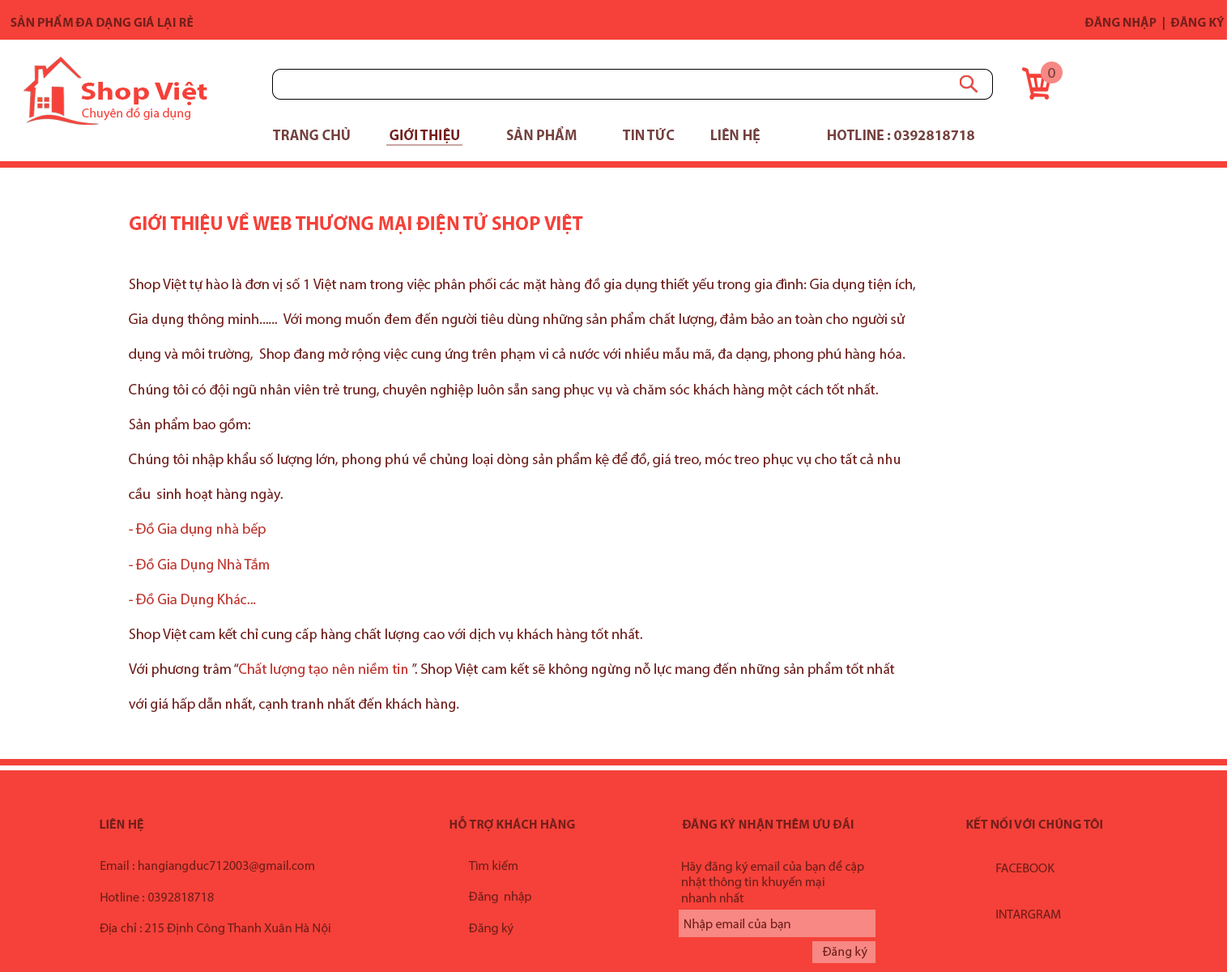
<style>
.page{position:relative;width:1227px;height:972px;background:#ffffff}
.page>*{position:absolute;margin:0}
.t1{font:13px "MyriadPro-Bold";color:#751f1b}
.t2{font:14.6px "MyriadPro-Regular";color:#75413e}
.t3{font:25.2px "MyriadPro-Bold";color:#f54139;scale:1.19 1}
.t4{font:13px "MyriadPro-Regular";color:#f54139}
.t5{font:13px "MyriadPro-Regular";color:#ffffff}
.t6{font:14.6px "MyriadPro-Bold";color:#75413e}
.t7{font:14.6px "MyriadPro-Bold";color:#751f1b}
.t8{font:14.6px "MyriadPro-Regular";color:#751f1b}
.t9{font:19.4px "MyriadPro-Bold";color:#f54139;text-transform:uppercase}
.t10{font:14.6px "MyriadPro-Regular";color:#c2342d}
.t11{font:13px "MyriadPro-Bold";color:#751f1b;text-transform:uppercase}
.t12{font:13px "MyriadPro-Regular";color:#751f1b}
</style>
<div class="page">
<p class="t1" style="left:11px;top:15px;width:182px;height:15px">SẢN PHẨM ĐA DẠNG GIÁ LẠI RẺ</p>
<p class="t1" style="left:1084px;top:16px;width:141px;height:14px">ĐĂNG NHẬP  |  ĐĂNG KÝ</p>
<p class="t2" style="left:1048px;top:68px;width:7px;height:10px">0</p>
<p class="t3" style="left:81px;top:82px;width:126px;height:23px">Shop Việt</p>
<p class="t4" style="left:77px;top:107px;width:113px;height:14px"><span class="t5">s</span>Chuyên đồ gia dụng</p>
<p class="t6" style="left:273px;top:126px;width:701px;height:17px">TRANG CHỦ   <span class="t7">GIỚI THIỆU</span>  SẢN PHẨM   TIN TỨC  LIÊN HỆ   HOTLINE : 0392818718</p>
<p class="t8" style="left:129px;top:212px;width:786px;height:500px"><span class="t9">Giới thiệu về web thương mại điện tử Shop Việt<br><br><br></span>Shop Việt tự hào là đơn vị số 1 Việt nam trong việc phân phối các mặt hàng đồ gia dụng thiết yếu trong gia đình: Gia dụng tiện ích,<br><br>Gia dụng thông minh......  Với mong muốn đem đến người tiêu dùng những sản phẩm chất lượng, đảm bảo an toàn cho người sử <br><br>dụng và môi trường,  Shop đang mở rộng việc cung ứng trên phạm vi cả nước với nhiều mẫu mã, đa dạng, phong phú hàng hóa. <br><br>Chúng tôi có đội ngũ nhân viên trẻ trung, chuyên nghiệp luôn sẵn sang phục vụ và chăm sóc khách hàng một cách tốt nhất.<br><br>Sản phẩm bao gồm:<br><br>Chúng tôi nhập khẩu số lượng lớn, phong phú về chủng loại dòng sản phẩm kệ để đồ, giá treo, móc treo phục vụ cho tất cả nhu <br><br>cầu  sinh hoạt hàng ngày.<br> <br><span class="t10">- Đồ Gia dụng nhà bếp<br><br>- Đồ Gia Dụng Nhà Tắm<br><br>- Đồ Gia Dụng Khác...<br><br></span>Shop Việt cam kết chỉ cung cấp hàng chất lượng cao với dịch vụ khách hàng tốt nhất.<br><br>Với phương trâm “<span class="t10">Chất lượng tạo nên niềm tin </span>”. Shop Việt cam kết sẽ không ngừng nỗ lực mang đến những sản phẩm tốt nhất <br><br>với giá hấp dẫn nhất, cạnh tranh nhất đến khách hàng.</p>
<p class="t11" style="left:100px;top:816px;width:1002px;height:16px"><span class="t1">LIÊN HỆ             HỖ TRỢ KHÁCH HÀNG     </span>Đăng ký nhận thêm ưu đãi             Kết nối với chúng tôi</p>
<p class="t12" style="left:100px;top:860px;width:230px;height:75px">Email : hangiangduc712003@gmail.com<br><br>Hotline : 0392818718<br><br>Địa chỉ : 215 Định Công Thanh Xuân Hà Nội</p>
<p class="t12" style="left:468px;top:859px;width:63px;height:76px">Tìm kiếm<br><br>Đăng  nhập<br><br>Đăng ký</p>
<p class="t12" style="left:682px;top:860px;width:182px;height:42px">Hãy đăng ký email của bạn để cập <br>nhật thông tin khuyến mại<br>nhanh nhất</p>
<p class="t12" style="left:996px;top:863px;width:65px;height:55px">FACEBOOK<br><br><br>INTARGRAM</p>
<p class="t12" style="left:684px;top:918px;width:106px;height:13px">Nhập email của bạn</p>
<p class="t12" style="left:822px;top:946px;width:45px;height:13px">Đăng ký</p>
</div>
